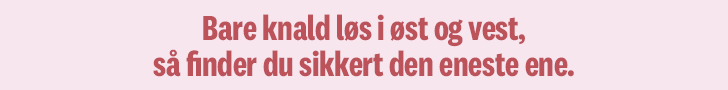
<style>
.page{position:relative;width:728px;height:90px;background:#f8e6ef}
.page>*{position:absolute;margin:0}
.t1{font:36px/36px "National2Condensed-Bold";letter-spacing:-0.008em;color:#bc535a}
</style>
<div class="page">
<p class="t1" style="left:153px;top:14px;width:421px;height:63px;text-align:center">Bare knald løs i øst og vest,<br>så finder du sikkert den eneste ene.</p>
</div>
